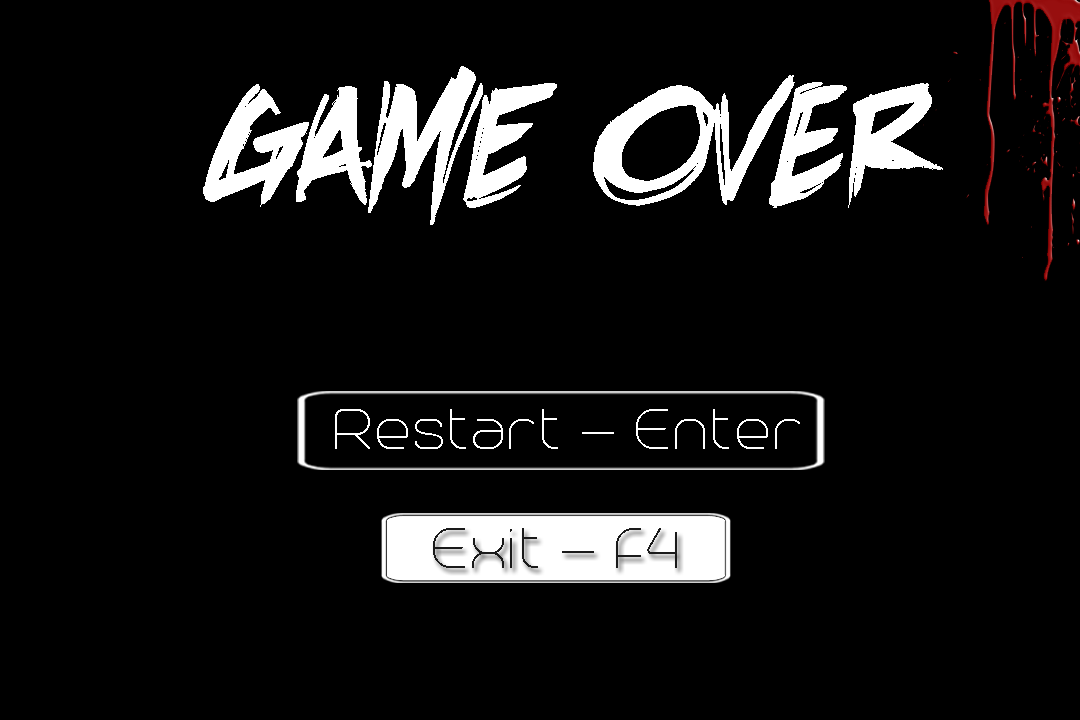
<style>
.page{position:relative;width:1080px;height:720px;background:#000000}
.page>*{position:absolute;margin:0}
.t1{font:200px "DeathRattleBB";color:#ffffff}
.t2{font:72px "Trench-Thin";color:#ffffff}
.t3{font:72px "Trench-Thin";color:#1a1a1a}
</style>
<div class="page">
<p class="t1" style="left:203px;top:66px;width:740px;height:159px">Game OVER</p>
<p class="t2" style="left:335px;top:409px;width:465px;height:40px">Restart - Enter</p>
<p class="t3" style="left:433px;top:528px;width:244px;height:40px">Exit - F4</p>
</div>
